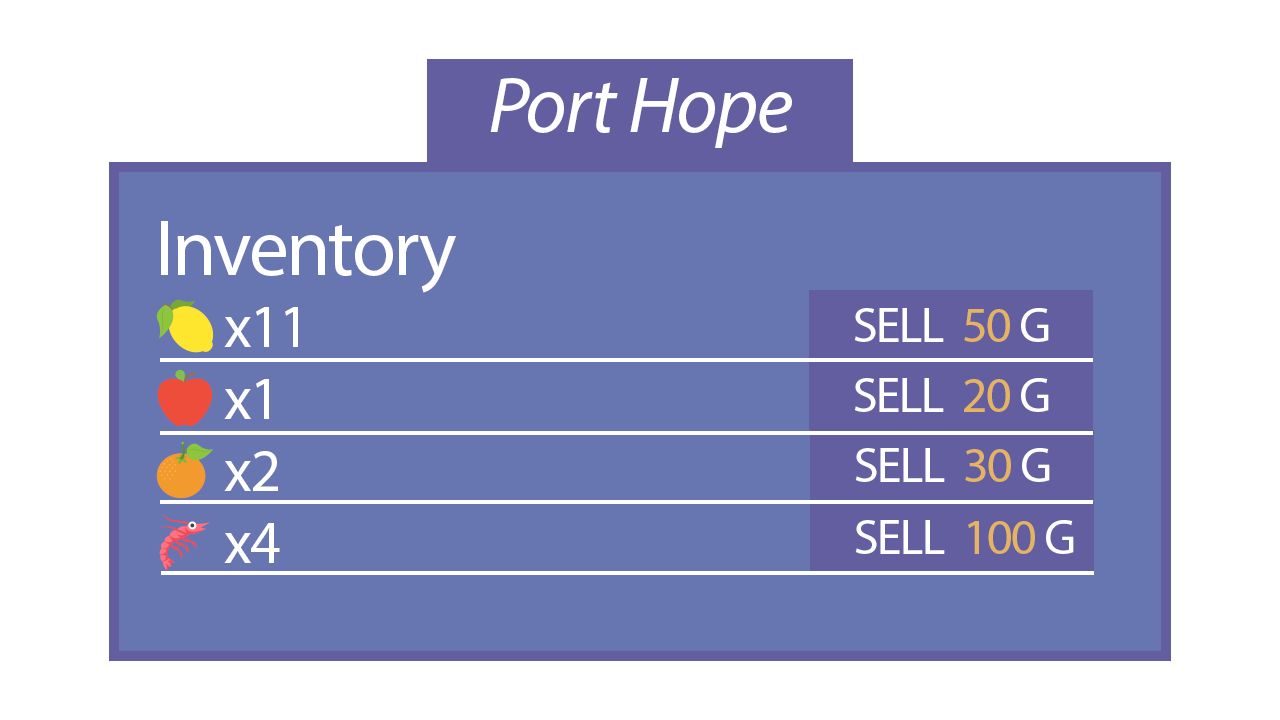
<style>
.page{position:relative;width:1280px;height:720px;background:#6775b1}
.page>*{position:absolute;margin:0}
.t1{font:80px "MyriadPro-It";letter-spacing:-0.02em;color:#ffffff}
.t2{font:80px/115px "MyriadPro-Regular";letter-spacing:-0.03em}
.t3{font:60px "EmojiOneColor";letter-spacing:-0.03em}
.t4{font:60px "MyriadPro-Regular";letter-spacing:-0.03em}
.t5{font:50px "MyriadPro-Regular";letter-spacing:-0.03em;color:#ffffff}
.t6{font:50px "MyriadPro-Regular";letter-spacing:-0.03em;color:#e5b463}
</style>
<div class="page">
<p class="t1" style="left:490px;top:78px;width:302px;height:70px">Port Hope</p>
<p class="t2" style="left:156px;top:221px;width:300px;height:350px">Inventory<br><span class="t3">🍋</span><span class="t4"> x11 <br></span><span class="t3">🍎</span><span class="t4"> x1<br></span><span class="t3">🍊</span><span class="t4"> x2<br></span><span class="t3">🦐</span><span class="t4"> x4</span></p>
<p class="t5" style="left:854px;top:308px;width:195px;height:34px">SELL  <span class="t6">50 </span>G</p>
<p class="t5" style="left:854px;top:378px;width:195px;height:34px">SELL  <span class="t6">20 </span>G</p>
<p class="t5" style="left:855px;top:448px;width:195px;height:34px">SELL  <span class="t6">30 </span>G</p>
<p class="t5" style="left:855px;top:520px;width:219px;height:34px">SELL  <span class="t6">100 </span>G</p>
</div>
